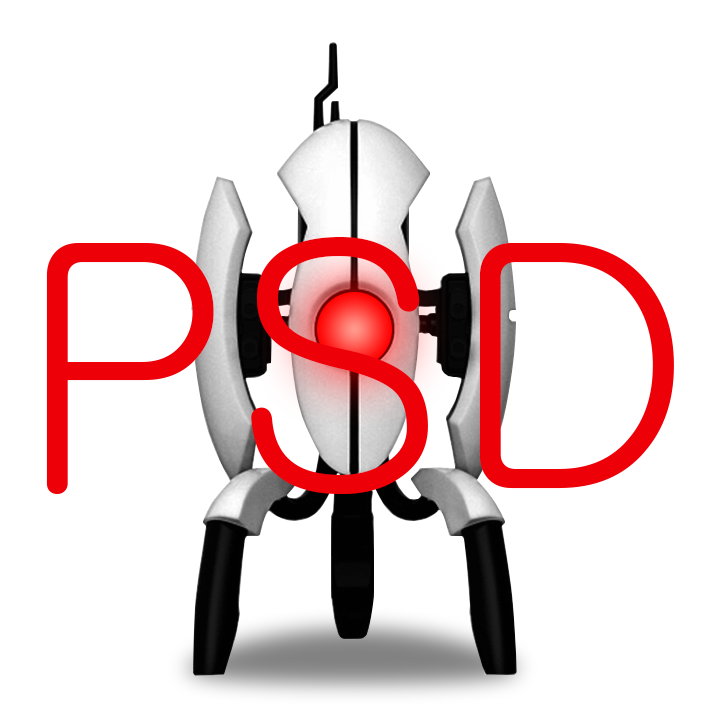
<style>
.page{position:relative;width:719px;height:719px;background:#ffffff}
.page>*{position:absolute;margin:0}
.t1{font:341.2px "Gulim";color:#ed0008}
</style>
<div class="page">
<p class="t1" style="left:46px;top:237px;width:628px;height:257px">PSD</p>
</div>
